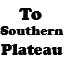
<style>
.page{position:relative;width:64px;height:64px;background:#ffffff}
.page>*{position:absolute;margin:0}
.t1{font:13px "CooperBlack";color:#030303}
.t2{font:18px "CooperBlack";color:#030303}
.t3{font:16px "CooperBlack";color:#030303}
</style>
<div class="page">
<p class="t1" style="left:0px;top:8px;width:63px;height:47px;text-align:center"><span class="t2">To<br></span>Southern<br><span class="t3">Plateau</span></p>
</div>
